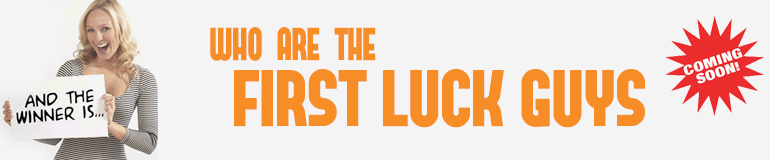
<style>
.page{position:relative;width:770px;height:160px;background:#f4f4f4}
.page>*{position:absolute;margin:0}
.t1{font:46px "FORQUE";color:#f68d26;scale:0.82 1}
.t2{font:79.7px "FORQUE";color:#f68d26}
.t3{font:79.7px "FORQUE";color:#f68d26;text-transform:uppercase}
</style>
<div class="page">
<p class="t1" style="left:210px;top:27px;width:166px;height:34px">WHO  ARE  THE</p>
<p class="t2" style="left:234px;top:69px;width:411px;height:59px"><span class="t3">first</span> LUCK GUYS</p>
</div>
